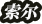
<style>
.page{position:relative;width:42px;height:24px;background:#181810}
.page>*{position:absolute;margin:0}
.t1{font:17px "SourceHanSerifSC-Heavy";color:#f8f8f8;font-style:italic}
</style>
<div class="page">
<p class="t1" style="left:3px;top:3px;width:36px;height:17px">索尔</p>
</div>
